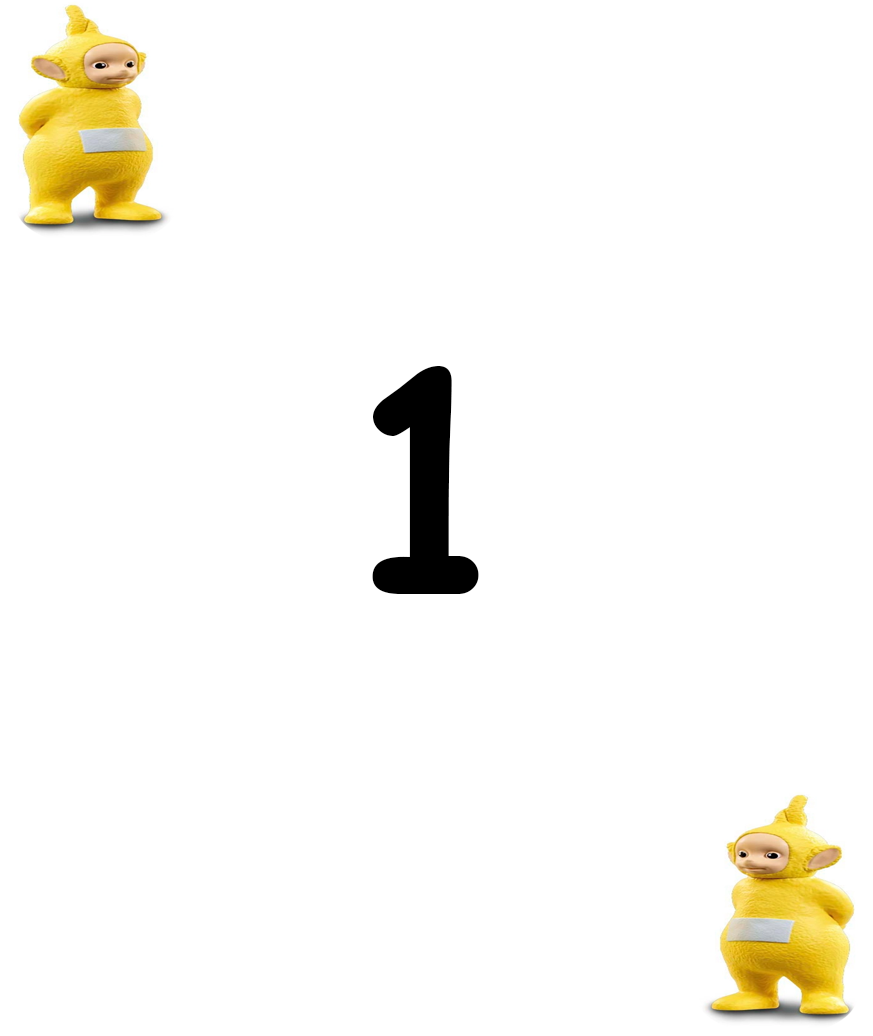
<style>
.page{position:relative;width:873px;height:1036px;background:#ffffff}
.page>*{position:absolute;margin:0}
.t1{font:300px "ComicSansMS-Bold";color:#000000;font-variant:small-caps}
</style>
<div class="page">
<p class="t1" style="left:372px;top:366px;width:107px;height:228px">1</p>
</div>
